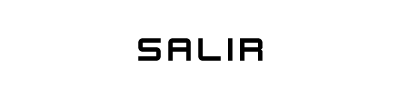
<style>
.page{position:relative;width:400px;height:100px;background:#ffffff}
.page>*{position:absolute;margin:0}
.t1{font:36px "KenVector-Future";color:#000000}
</style>
<div class="page">
<p class="t1" style="left:138px;top:38px;width:125px;height:23px">salir</p>
</div>
